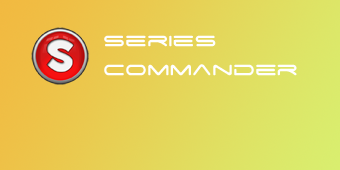
<style>
.page{position:relative;width:340px;height:170px}
.page>*{position:absolute;margin:0}
.t1{font:24px "SpaceAge";color:#ffffff}
</style>
<div class="page">
<p class="t1" style="left:104px;top:35px;width:193px;height:41px">series<br>commander</p>
</div>
